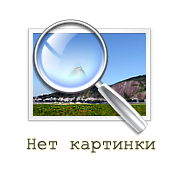
<style>
.page{position:relative;width:181px;height:181px;background:#ffffff}
.page>*{position:absolute;margin:0}
.t1{font:18px "CourierNewPSMT";color:#1e1e1e}
</style>
<div class="page">
<p class="t1" style="left:26px;top:138px;width:130px;height:15px">Нет картинки</p>
</div>
